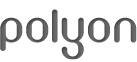
<style>
.page{position:relative;width:137px;height:62px;background:#ffffff}
.page>*{position:absolute;margin:0}
.t1{font:33.1px "DF667Chlorine";color:#606060}
</style>
<div class="page">
<p class="t1" style="left:0px;top:9px;width:137px;height:51px">polyon</p>
</div>
